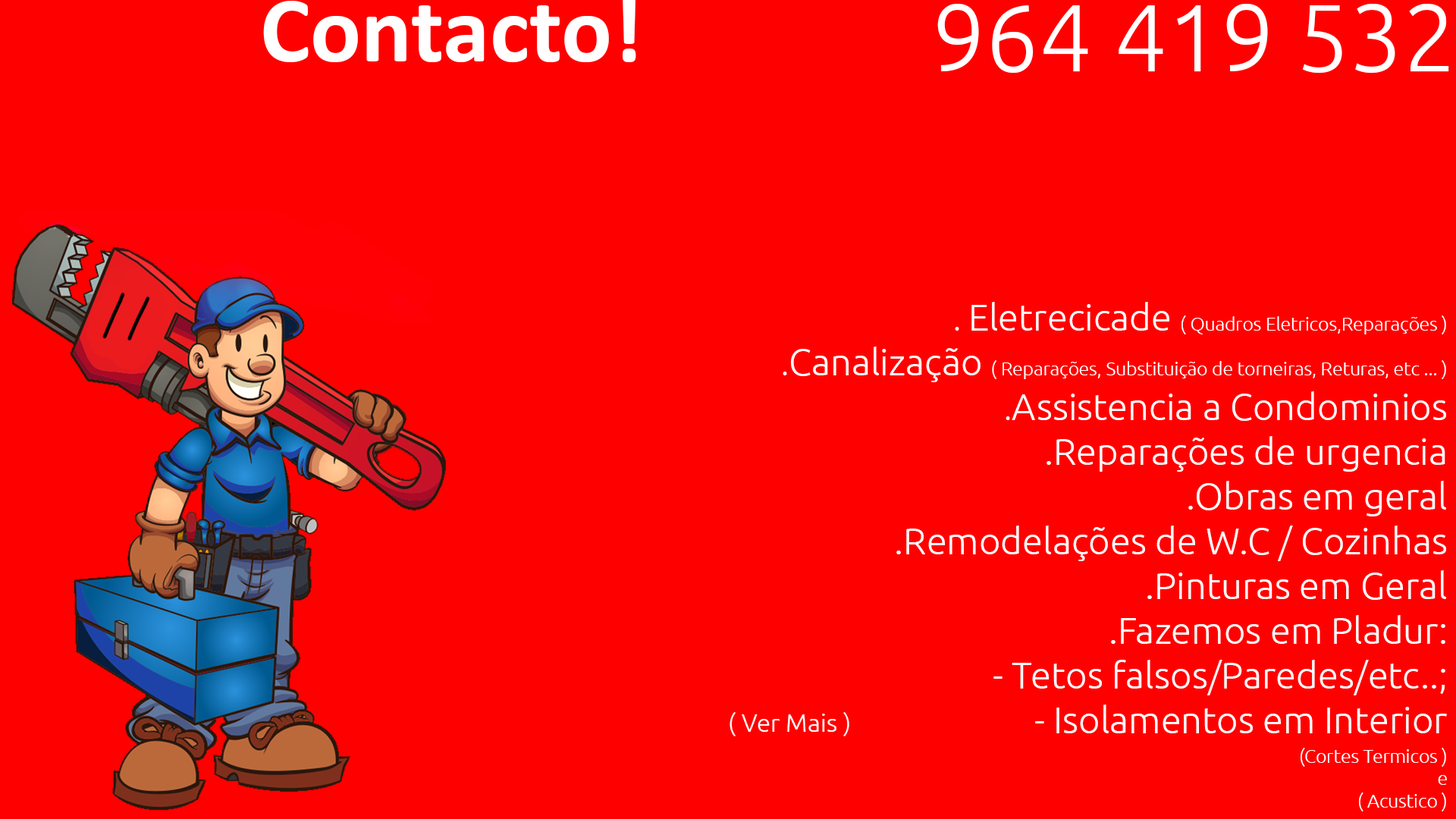
<style>
.page{position:relative;width:1456px;height:819px;background:#ff0000}
.page>*{position:absolute;margin:0}
.t1{font:94.8px "Ubuntu-Light";color:#ffffff}
.t2{font:37.3px "Ubuntu-Light";color:#ffffff}
.t3{font:31px "Ubuntu-Light";color:#ffffff}
.t4{font:18.6px "Ubuntu-Light";color:#ffffff}
.t5{font:25.3px "Ubuntu-Light";color:#ffffff}
</style>
<div class="page">
<p class="t1" style="left:937px;top:4px;width:512px;height:69px">964 419 532</p>
<p class="t2" style="left:783px;top:302px;width:664px;height:509px;text-align:right"><span class="t3">. </span>Eletrecicade <span class="t4">( Quadros Eletricos,Reparações )<br></span><span class="t3">.</span>Canalização <span class="t4">( Reparações, Substituição de torneiras, Returas, etc ... )<br></span><span class="t3">.</span>Assistencia a Condominios<br>.Reparações de urgencia<br>.Obras em geral<br>.Remodelações de W.C / Cozinhas <br>.Pinturas em Geral<br>.Fazemos em Pladur:<br>       - Tetos falsos/Paredes/etc..;<br>       - Isolamentos em Interior <br>                 <span class="t4">(Cortes Termicos )<br>                                     e<br>                            ( Acustico )</span></p>
<p class="t5" style="left:730px;top:712px;width:119px;height:24px">( Ver Mais )</p>
</div>
